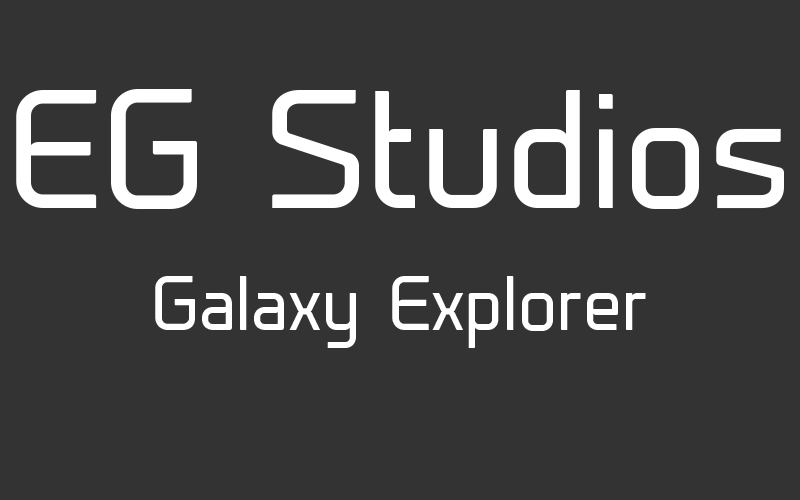
<style>
.page{position:relative;width:800px;height:500px;background:#333333}
.page>*{position:absolute;margin:0}
.t1{font:157.6px "Prime-Regular";color:#ffffff}
.t2{font:72px "Prime-Regular";color:#ffffff}
</style>
<div class="page">
<p class="t1" style="left:16px;top:89px;width:768px;height:120px">EG Studios</p>
<p class="t2" style="left:155px;top:276px;width:491px;height:72px">Galaxy Explorer</p>
</div>
